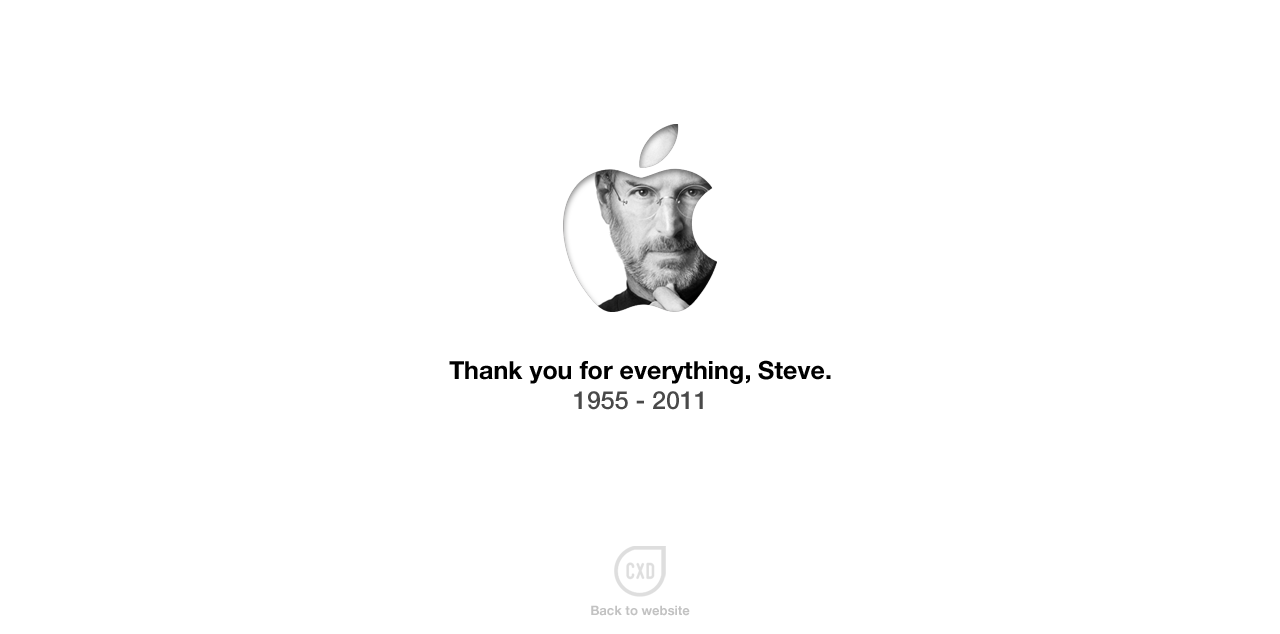
<style>
.page{position:relative;width:1280px;height:634px;background:#ffffff}
.page>*{position:absolute;margin:0}
.t1{font:25px "HelveticaNeue-Bold";color:#000000}
.t2{font:25px "HelveticaNeue-Medium";color:#494949}
.t3{font:13px "HelveticaNeue-Bold";color:#c2c2c2}
</style>
<div class="page">
<p class="t1" style="left:449px;top:360px;width:382px;height:50px;text-align:center">Thank you for everything, Steve.<br><span class="t2">1955 - 2011</span></p>
<p class="t3" style="left:591px;top:605px;width:99px;height:11px">Back to website</p>
</div>
